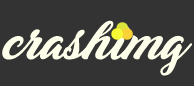
<style>
.page{position:relative;width:194px;height:86px;background:#333333}
.page>*{position:absolute;margin:0}
.t1{font:49px "YananeskaPersonalUse";color:#feffea}
</style>
<div class="page">
<p class="t1" style="left:2px;top:20px;width:190px;height:56px">crashimg</p>
</div>
